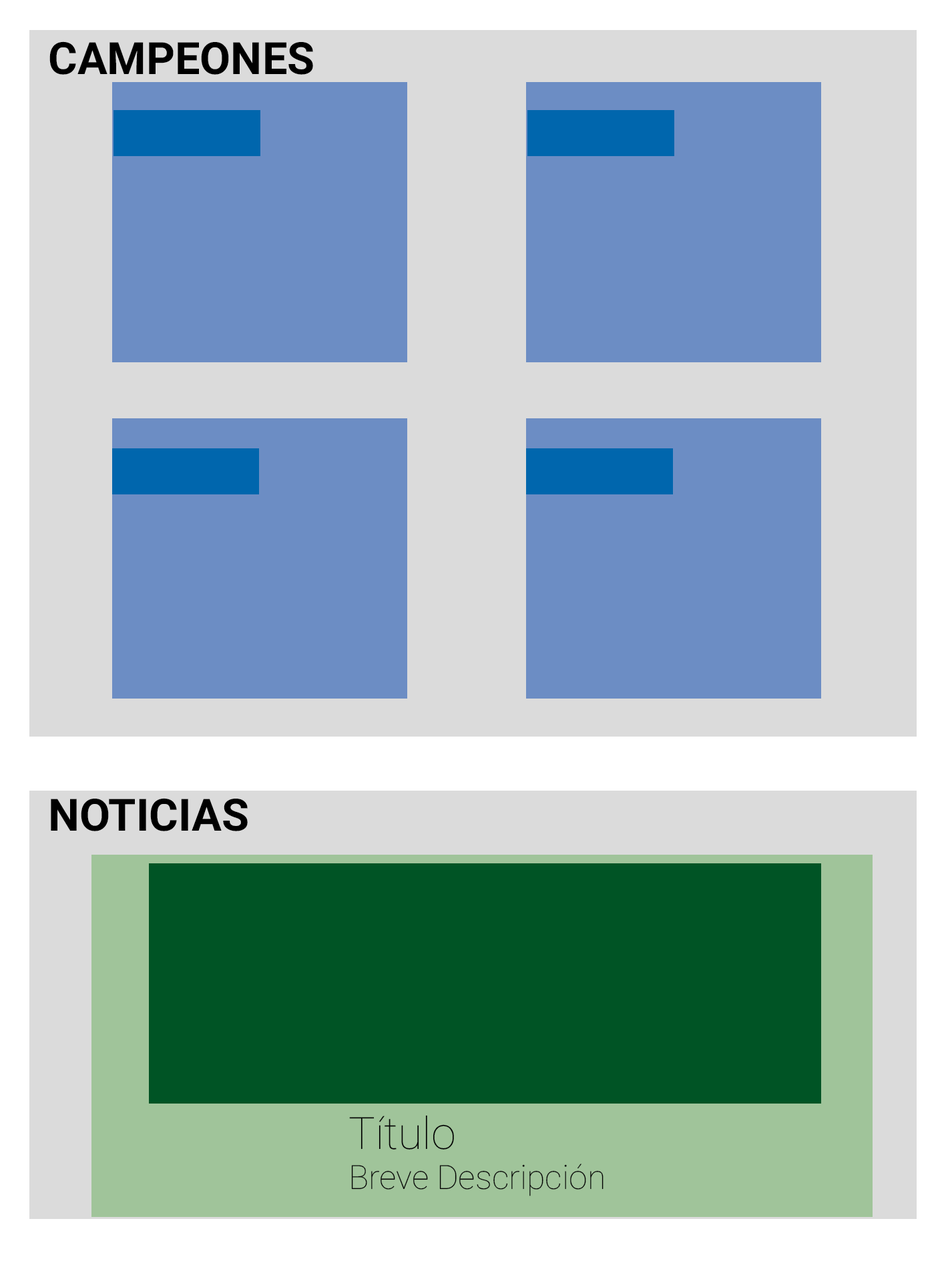
<style>
.page{position:relative;width:946px;height:1261px;background:#dbdbdb}
.page>*{position:absolute;margin:0}
.t1{font:44.5px "Roboto-Bold";color:#000000}
.t2{font:33.4px "Roboto-Thin";color:#000000}
.t3{font:44.5px "Roboto-Thin";color:#000000}
</style>
<div class="page">
<p class="t1" style="left:49px;top:41px;width:264px;height:34px">CAMPEONES</p>
<p class="t1" style="left:51px;top:798px;width:197px;height:33px">NOTICIAS</p>
<p class="t2" style="left:349px;top:1115px;width:254px;height:81px"><span class="t3">Título<br></span>Breve Descripción</p>
</div>
